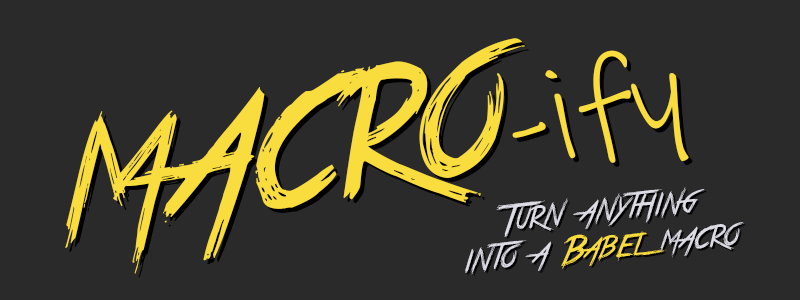
<style>
.page{position:relative;width:800px;height:300px;background:#2a2a2a}
.page>*{position:absolute;margin:0}
.t1{font:177.3px "TrueLies";color:#f9dc3e}
.t2{font:129.3px "InkFree";color:#f9dc3e}
.t3{font:31.2px "TrueLies";color:#dddce5}
.t4{font:31.2px "TrueLies";color:#f9dc3e}
</style>
<div class="page">
<p class="t1" style="left:65px;top:38px;width:624px;height:236px;rotate:-11deg">macro<span class="t2">-ify</span></p>
<p class="t3" style="left:465px;top:187px;width:279px;height:88px;text-align:center;rotate:-6deg">Turn anything<br>into a <span class="t4">Babel</span> macro</p>
</div>
